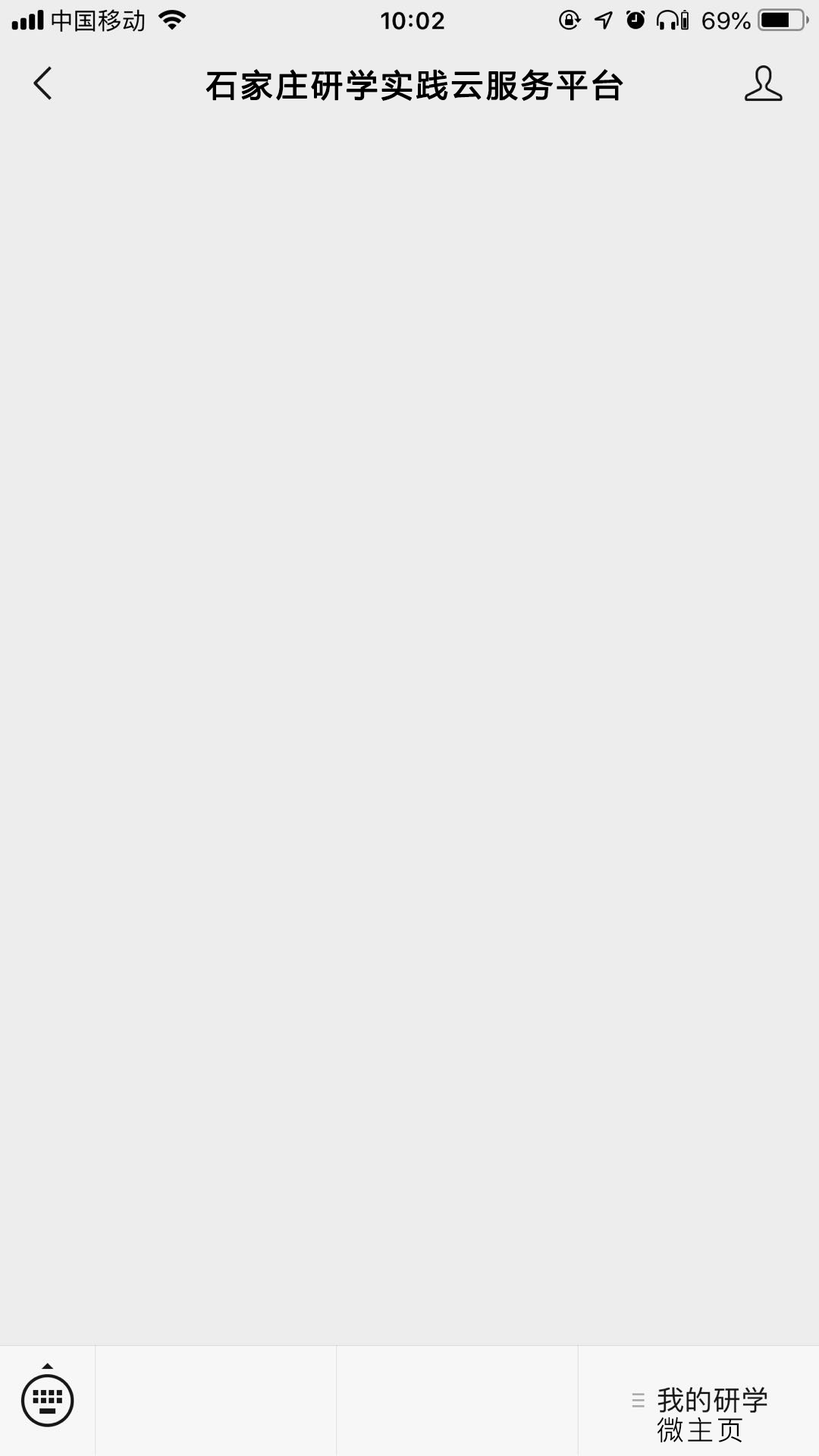
<style>
.page{position:relative;width:819px;height:1456px;background:#ededed}
.page>*{position:absolute;margin:0}
.t1{font:31.1px "MicrosoftYaHei";letter-spacing:0.1em;color:#000000;font-weight:bold}
.t2{font:27.3px "PingFang-SC-Regular";letter-spacing:0.1em;color:#000000}
</style>
<div class="page">
<p class="t1" style="left:206px;top:69px;width:417px;height:32px">石家庄研学实践云服务平台</p>
<p class="t2" style="left:657px;top:1417px;width:85px;height:25px">微主页</p>
</div>
